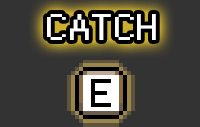
<style>
.page{position:relative;width:200px;height:127px;background:#333333}
.page>*{position:absolute;margin:0}
.t1{font:52px "Silver";color:#ffffff;scale:1.3 1}
</style>
<div class="page">
<p class="t1" style="left:47px;top:14px;width:109px;height:26px">CATCH</p>
</div>
